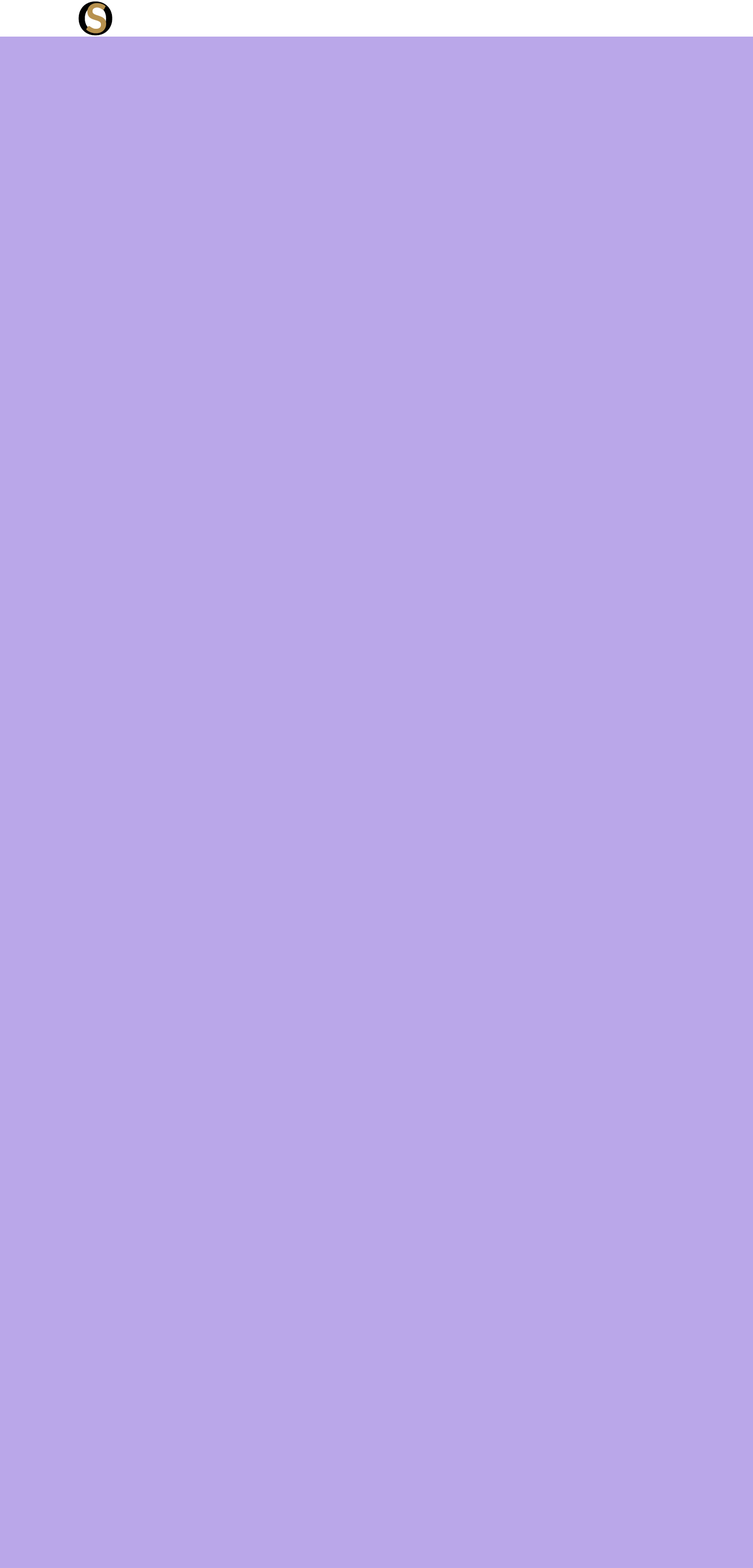
<style>
.page{position:relative;width:753px;height:1568px;background:#baa7e9}
.page>*{position:absolute;margin:0}
.t1{font:46px "Lato-Bold";color:#010101}
.t2{font:40.8px "Lato-Bold";color:#b7914e}
</style>
<div class="page">
<p class="t1" style="left:78px;top:1px;width:34px;height:35px">O</p>
<p class="t2" style="left:86px;top:3px;width:20px;height:30px">S</p>
</div>
